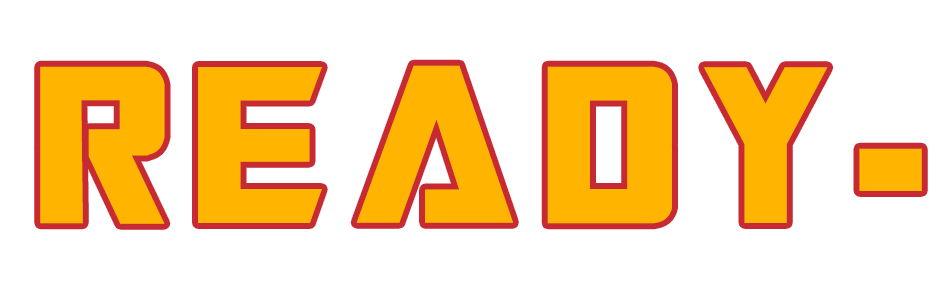
<style>
.page{position:relative;width:950px;height:290px;background:#ffffff}
.page>*{position:absolute;margin:0}
.t1{font:250px "TransformersMovie";letter-spacing:0.1em;color:#ffb400}
</style>
<div class="page">
<p class="t1" style="left:40px;top:65px;width:882px;height:159px">READY-</p>
</div>
